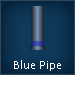
<style>
.page{position:relative;width:75px;height:88px}
.page>*{position:absolute;margin:0}
.t1{font:12.9px "Calibri";color:#ffffff}
</style>
<div class="page">
<p class="t1" style="left:14px;top:60px;width:47px;height:26px;text-align:center">Blue Pipe Only</p>
</div>
